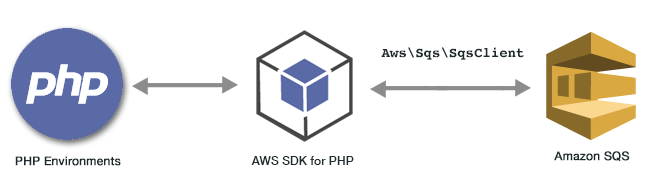
<style>
.page{position:relative;width:650px;height:190px;background:#ffffff}
.page>*{position:absolute;margin:0}
.t1{font:14px "Courier-Bold";color:#1d2a2e}
.t2{font:12px "HelveticaNeue";color:#1d2a2e;font-weight:bold}
.t3{font:12.1px "HelveticaNeue-Medium";color:#1d2a2e}
</style>
<div class="page">
<p class="t1" style="left:381px;top:47px;width:143px;height:13px">Aws\Sqs\SqsClient</p>
<p class="t2" style="left:15px;top:156px;width:106px;height:10px">PHP Environments</p>
<p class="t3" style="left:251px;top:156px;width:103px;height:9px">AWS SDK for PHP</p>
<p class="t2" style="left:554px;top:151px;width:76px;height:10px">Amazon SQS</p>
</div>
